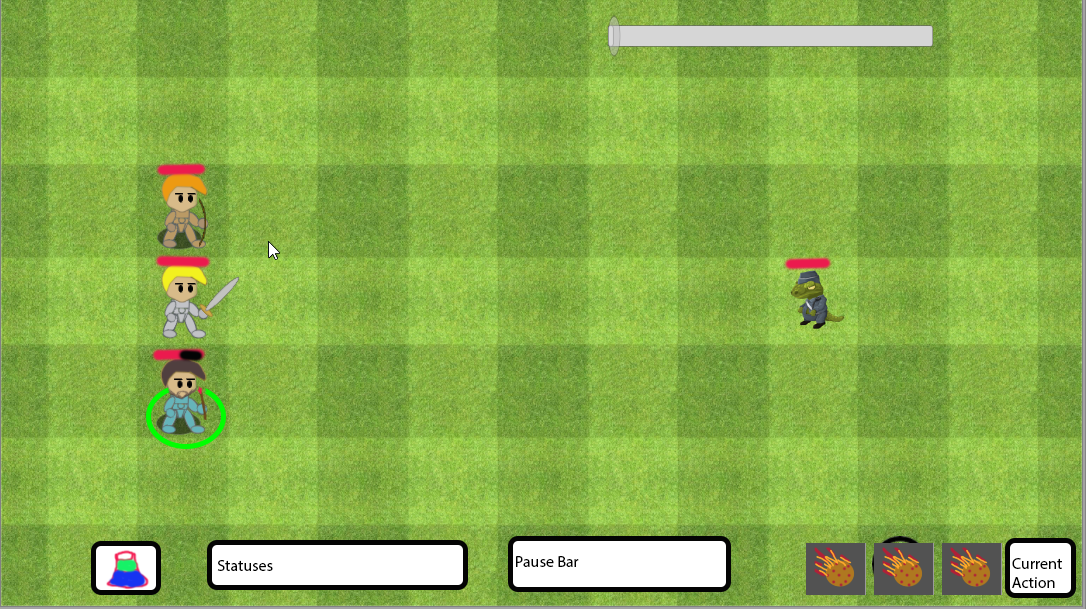
<style>
.page{position:relative;width:1086px;height:609px}
.page>*{position:absolute;margin:0}
.t1{font:12px "MyriadPro-Regular";color:#000000}
</style>
<div class="page">
<p class="t1" style="left:516px;top:556px;width:63px;height:11px">Pause Bar</p>
<p class="t1" style="left:1012px;top:558px;width:50px;height:30px">Current <br>  Action</p>
<p class="t1" style="left:217px;top:560px;width:56px;height:11px">Statuses</p>
</div>
